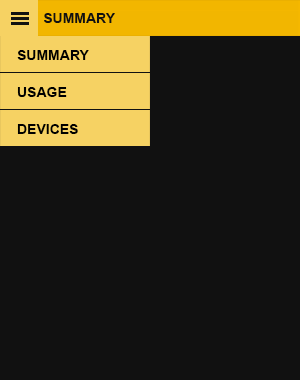
<style>
.page{position:relative;width:300px;height:380px;background:#111111}
.page>*{position:absolute;margin:0}
.t1{font:14px "Arial-BoldMT";color:#111111}
.t2{font:14px "Arial-BoldMT";color:#000000}
</style>
<div class="page">
<p class="t1" style="left:44px;top:13px;width:71px;height:10px">SUMMARY</p>
<p class="t2" style="left:17px;top:50px;width:72px;height:10px">SUMMARY</p>
<p class="t2" style="left:17px;top:87px;width:50px;height:10px">USAGE</p>
<p class="t2" style="left:17px;top:124px;width:61px;height:10px">DEVICES</p>
</div>
